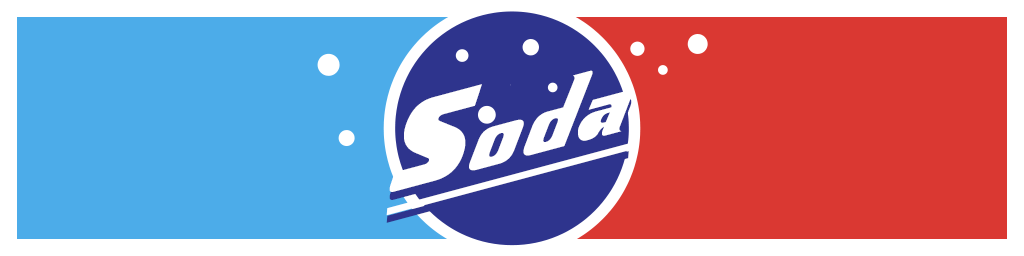
<style>
.page{position:relative;width:1024px;height:256px;background:#da3832}
.page>*{position:absolute;margin:0}
.t1{font:95.7px "-Xenogears";letter-spacing:0.04em;color:#ffffff;text-decoration:underline;scale:0.94 1}
</style>
<div class="page">
<p class="t1" style="left:386px;top:70px;width:246px;height:146px;rotate:-15deg">Soda</p>
</div>
